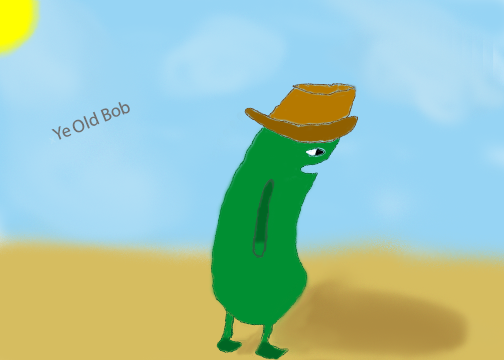
<style>
.page{position:relative;width:504px;height:360px}
.page>*{position:absolute;margin:0}
.t1{font:18px "MyriadPro-Regular";color:#707070}
.t2{font:12px "MyriadPro-Regular";color:#b3dff4}
</style>
<div class="page">
<p class="t1" style="left:49px;top:102px;width:81px;height:42px;rotate:-22deg"><span class="t2">x</span>Ye Old Bob</p>
</div>
